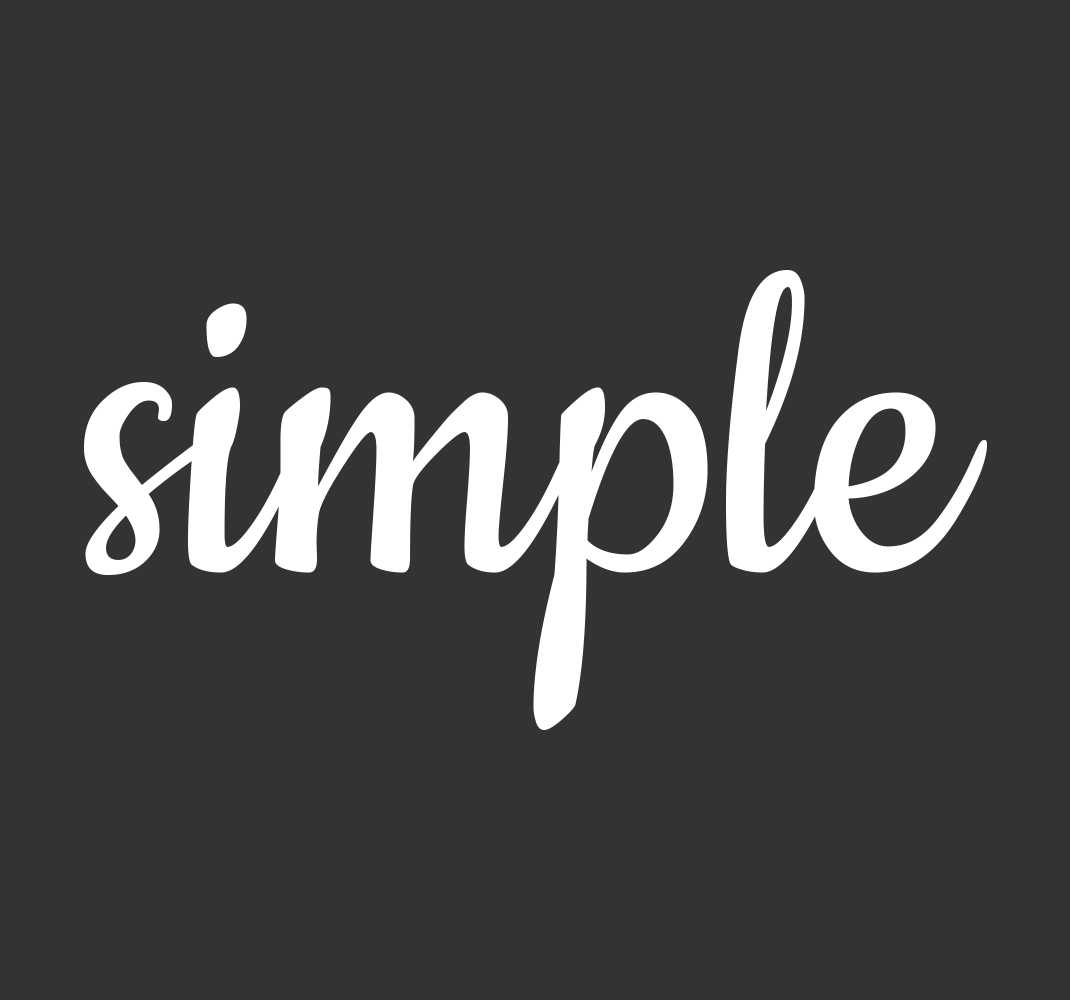
<style>
.page{position:relative;width:1070px;height:1000px;background:#333333}
.page>*{position:absolute;margin:0}
.t1{font:500px "Cookie-Regular";color:#ffffff}
</style>
<div class="page">
<p class="t1" style="left:84px;top:270px;width:903px;height:460px">simple</p>
</div>
